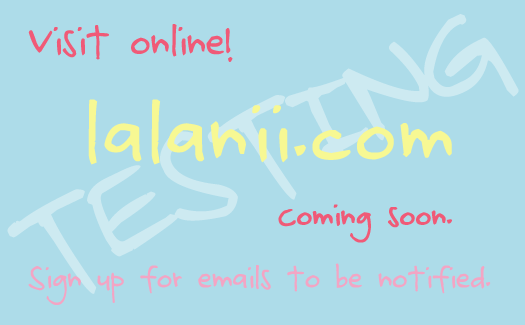
<style>
.page{position:relative;width:525px;height:325px;background:#addce9}
.page>*{position:absolute;margin:0}
.t1{font:96px "PeaZingy";letter-spacing:-0.02em;color:#cdeaf1}
.t2{font:32px "PeaZingy";letter-spacing:0.05em;color:#f05a77}
.t3{font:64px "PeaZingy";letter-spacing:0.1em;color:#f7f893}
.t4{font:24px "PeaZingy";letter-spacing:0.05em;color:#f05a77;font-weight:bold}
.t5{font:24px/40px "PeaZingy";letter-spacing:0.05em;color:#f3a5c4}
</style>
<div class="page">
<p class="t1" style="left:7px;top:14px;width:512px;height:280px;rotate:-25deg">TESTING</p>
<p class="t2" style="left:28px;top:24px;width:205px;height:38px">Visit online!</p>
<p class="t3" style="left:88px;top:99px;width:364px;height:66px">lalanii.com</p>
<p class="t4" style="left:278px;top:204px;width:174px;height:39px">Coming soon.</p>
<p class="t5" style="left:28px;top:263px;width:463px;height:42px;text-align:center">Sign up for emails to be notified.</p>
</div>
